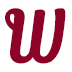
<style>
.page{position:relative;width:72px;height:72px;background:#ffffff}
.page>*{position:absolute;margin:0}
.t1{font:72px "LilyScriptOne-Regular";color:#8c0327}
</style>
<div class="page">
<p class="t1" style="left:5px;top:8px;width:61px;height:56px">W</p>
</div>
